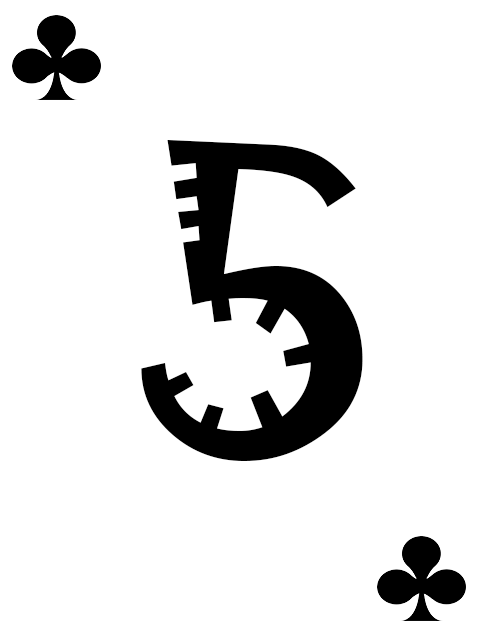
<style>
.page{position:relative;width:480px;height:640px;background:#ffffff}
.page>*{position:absolute;margin:0}
.t1{font:386.3px "Jokerman-Regular";color:#000000}
</style>
<div class="page">
<p class="t1" style="left:141px;top:140px;width:222px;height:321px">5</p>
</div>
